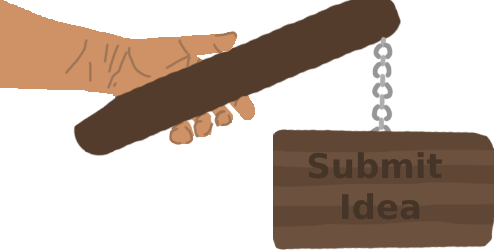
<style>
.page{position:relative;width:500px;height:250px;background:#ffffff}
.page>*{position:absolute;margin:0}
.t1{font:34px "DejaVuSans-Bold";color:#453428}
</style>
<div class="page">
<p class="t1" style="left:308px;top:152px;width:134px;height:68px;text-align:center">Submit <br>Idea</p>
</div>
